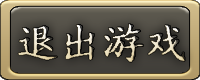
<style>
.page{position:relative;width:200px;height:80px}
.page>*{position:absolute;margin:0}
.t1{font:43px "¿¬Ìå";font-weight:bold}
</style>
<div class="page">
<p class="t1" style="left:18px;top:23px;width:167px;height:39px">退出游戏</p>
</div>
